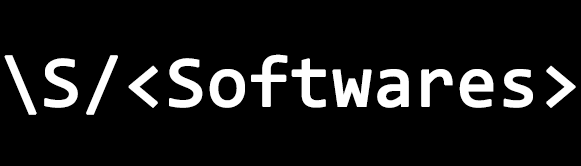
<style>
.page{position:relative;width:581px;height:166px;background:#000000}
.page>*{position:absolute;margin:0}
.t1{font:72px "Consolas";color:#ffffff;font-weight:bold}
</style>
<div class="page">
<p class="t1" style="left:4px;top:54px;width:572px;height:61px">\S/&lt;Softwares&gt;</p>
</div>
